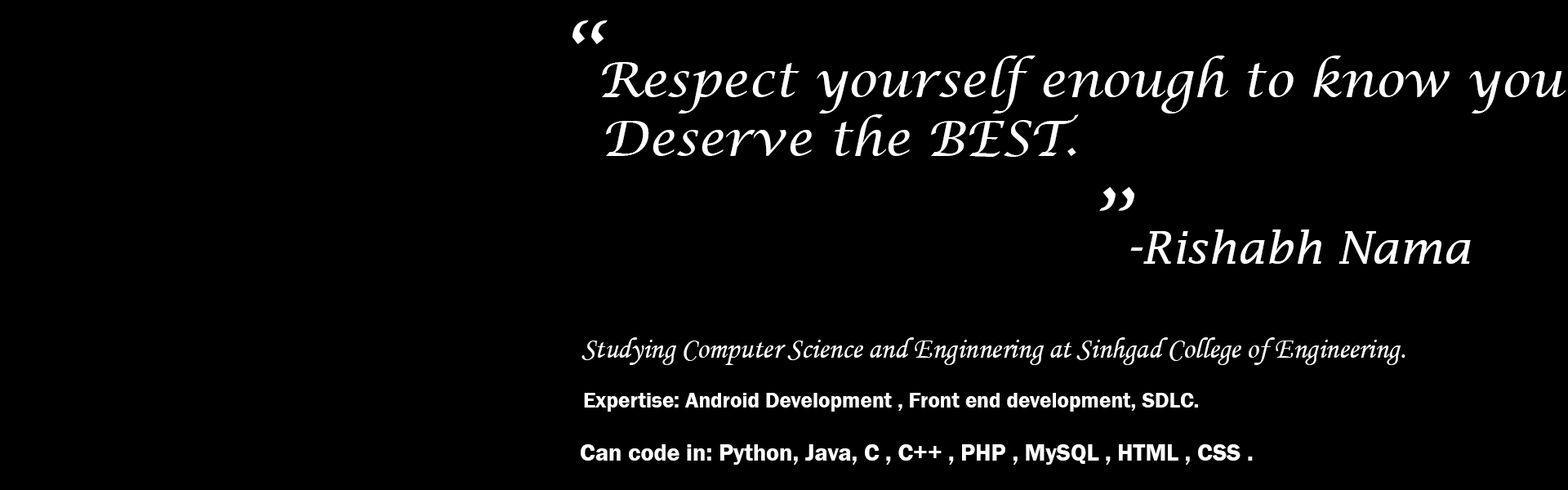
<style>
.page{position:relative;width:1568px;height:490px;background:#000000}
.page>*{position:absolute;margin:0}
.t1{font:29.4px "MonotypeCorsiva";color:#ffffff}
.t2{font:89.8px "LucidaCalligraphy-Italic";color:#ffffff}
.t3{font:49px "LucidaCalligraphy-Italic";color:#ffffff}
.t4{font:44.9px "LucidaFax-Italic";color:#ffffff}
.t5{font:22.1px "FranklinGothic-Demi";color:#ffffff}
.t6{font:24.5px "FranklinGothic-Demi";color:#ffffff}
</style>
<div class="page">
<p class="t1" style="left:572px;top:20px;width:994px;height:445px"><span class="t2">“</span><span class="t3">Respect yourself enough to know you<br>  Deserve the BEST.<br>                  </span><span class="t2">”</span><span class="t3">-</span><span class="t4">Rishabh Nama<br><br></span>    Studying Computer Science and Enginnering at Sinhgad College of Engineering.<br><br><span class="t5">     Expertise: Android Development , Front end development, SDLC.<br><br></span><span class="t6">    Can code in: Python, Java, C , C++ , PHP , MySQL , HTML , CSS .</span></p>
</div>
